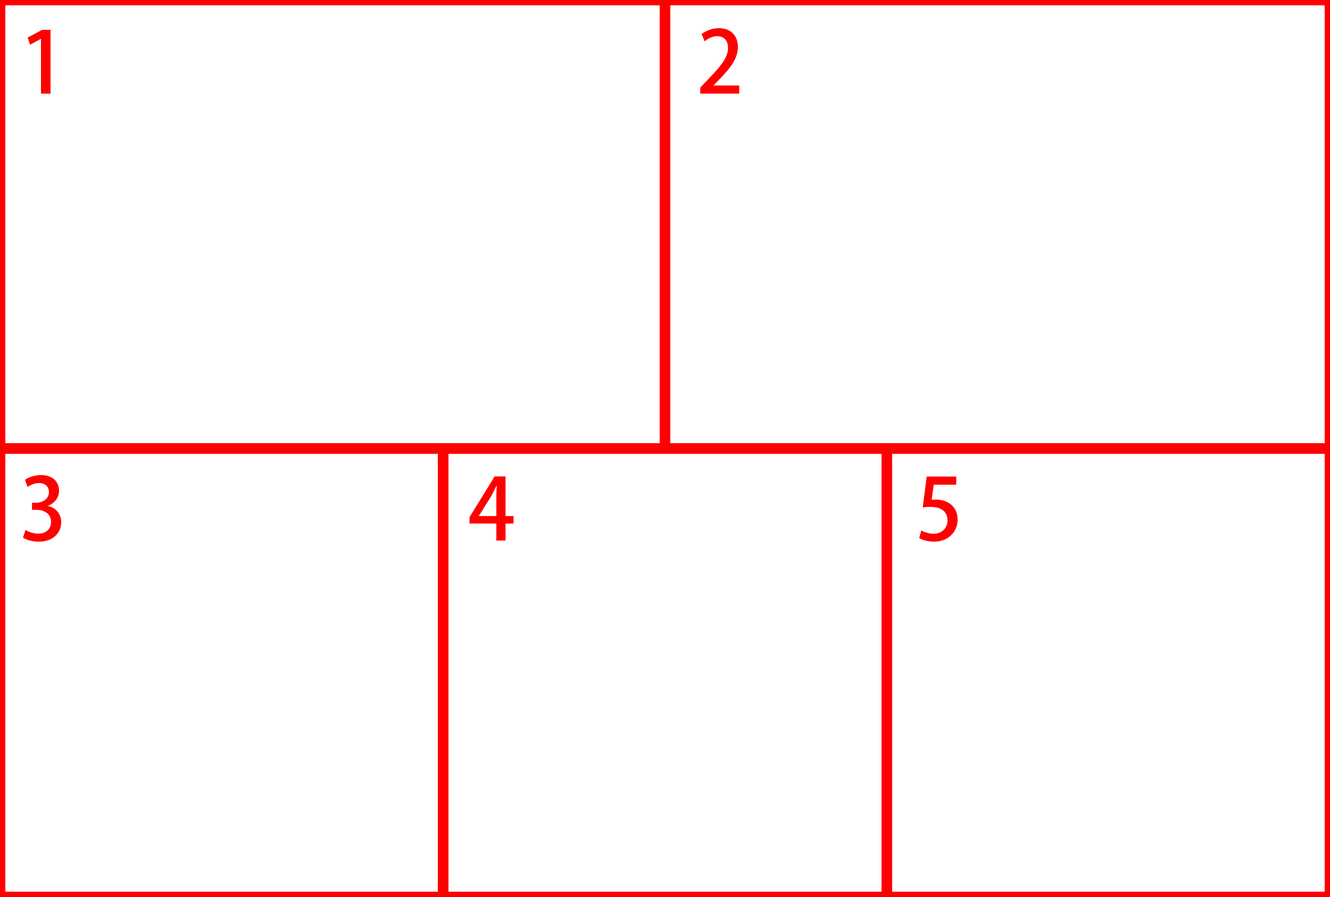
<style>
.page{position:relative;width:1330px;height:897px;background:#ffffff}
.page>*{position:absolute;margin:0}
.t1{font:85.1px "AdobeFanHeitiStd-Bold";color:#ff0000}
</style>
<div class="page">
<p class="t1" style="left:23px;top:28px;width:934px;height:514px">1                                 2<br><br><br>3                     4                     5</p>
</div>
